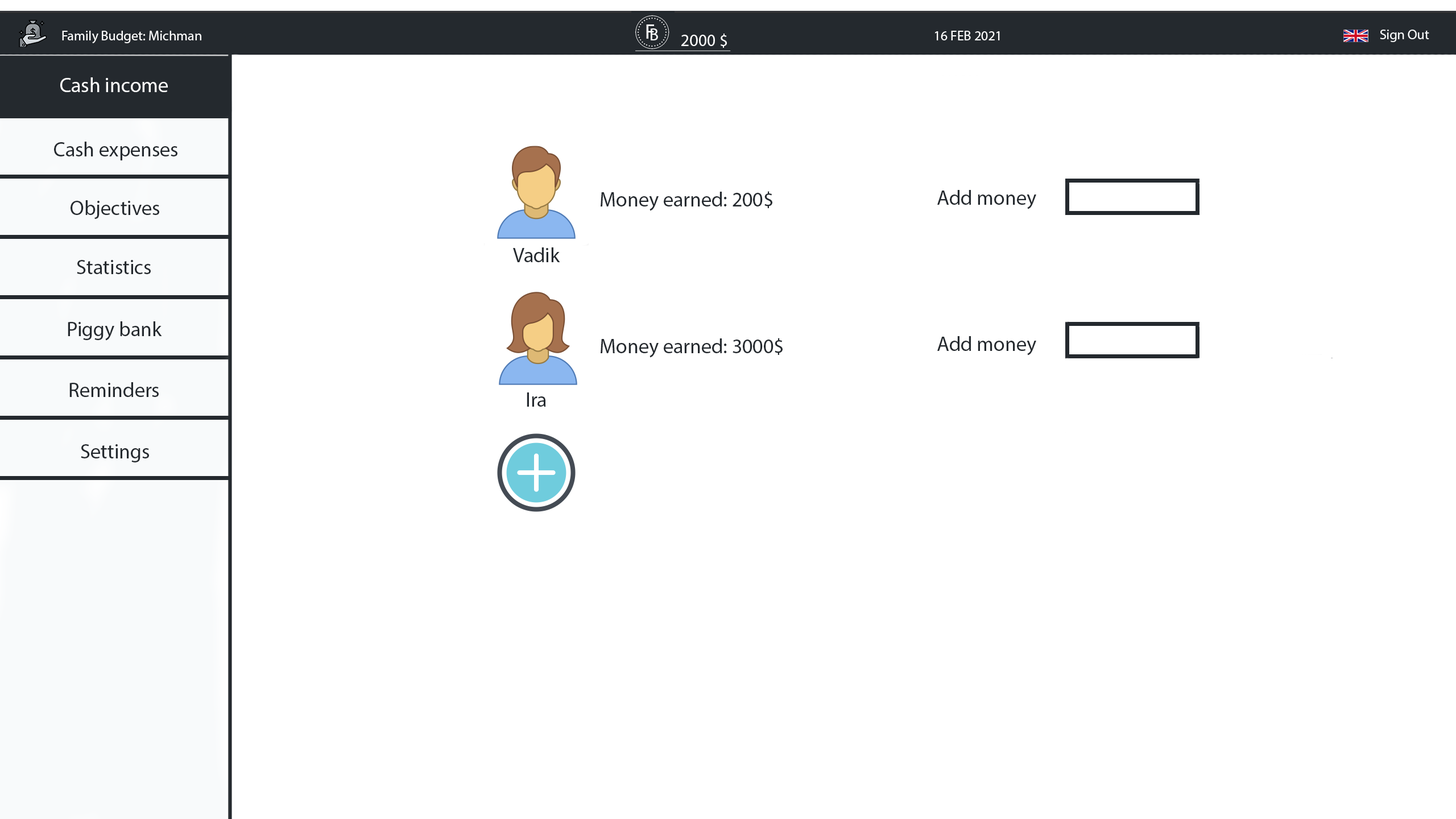
<style>
.page{position:relative;width:1456px;height:819px;background:#ffffff}
.page>*{position:absolute;margin:0}
.t1{font:13.6px "MyriadPro-Regular";color:#f8fafb}
.t2{font:13.6px "MyriadPro-Regular";color:#ffffff}
.t3{font:17.1px "MyriadPro-Regular";color:#ffffff}
.t4{font:20.5px "MyriadPro-Regular";color:#ffffff}
.t5{font:20.5px "MyriadPro-Regular";color:#24292e}
</style>
<div class="page">
<p class="t1" style="left:1380px;top:30px;width:49px;height:12px">Sign Out</p>
<p class="t2" style="left:62px;top:31px;width:139px;height:12px">Family Budget: Michman</p>
<p class="t3" style="left:681px;top:34px;width:46px;height:14px">2000 $</p>
<p class="t2" style="left:935px;top:31px;width:65px;height:9px">16 FEB 2021</p>
<p class="t4" style="left:60px;top:77px;width:108px;height:15px">Cash income</p>
<p class="t5" style="left:54px;top:142px;width:123px;height:18px">Cash expenses</p>
<p class="t5" style="left:601px;top:191px;width:171px;height:20px">Money earned: 200$</p>
<p class="t5" style="left:937px;top:190px;width:99px;height:19px">Add money</p>
<p class="t5" style="left:71px;top:200px;width:88px;height:19px">Objectives</p>
<p class="t5" style="left:513px;top:247px;width:47px;height:15px">Vadik</p>
<p class="t5" style="left:77px;top:260px;width:74px;height:14px">Statistics</p>
<p class="t5" style="left:68px;top:321px;width:94px;height:20px">Piggy bank</p>
<p class="t5" style="left:601px;top:338px;width:182px;height:20px">Money earned: 3000$<br>^</p>
<p class="t5" style="left:937px;top:336px;width:99px;height:19px">Add money</p>
<p class="t5" style="left:69px;top:382px;width:90px;height:15px">Reminders</p>
<p class="t5" style="left:527px;top:392px;width:19px;height:15px">Ira</p>
<p class="t5" style="left:81px;top:444px;width:68px;height:18px">Settings</p>
</div>
